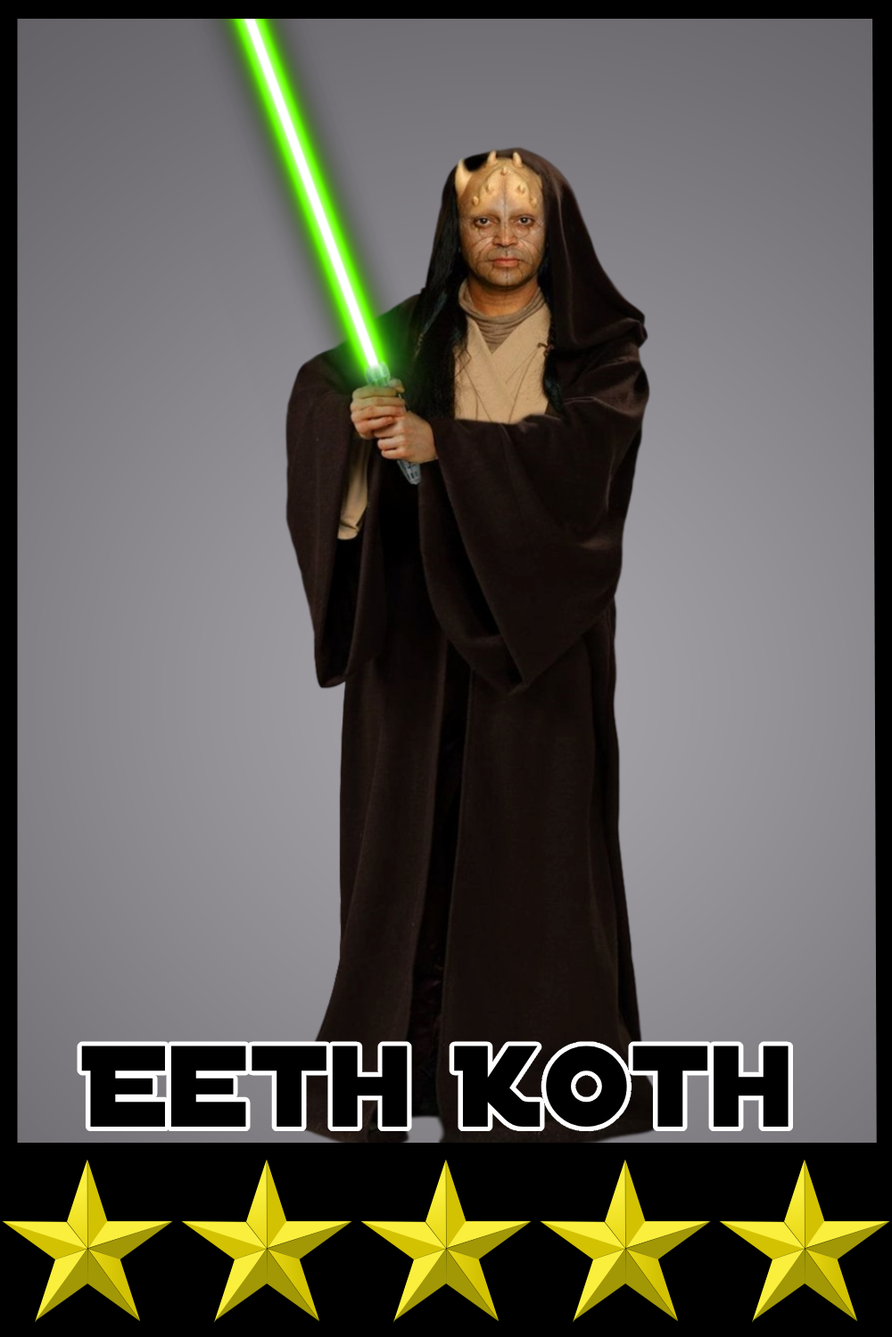
<style>
.page{position:relative;width:892px;height:1337px}
.page>*{position:absolute;margin:0}
.t1{font:124.1px "DistantGalaxy";color:#000000}
</style>
<div class="page">
<p class="t1" style="left:81px;top:1046px;width:707px;height:81px">Eeth Koth</p>
</div>
